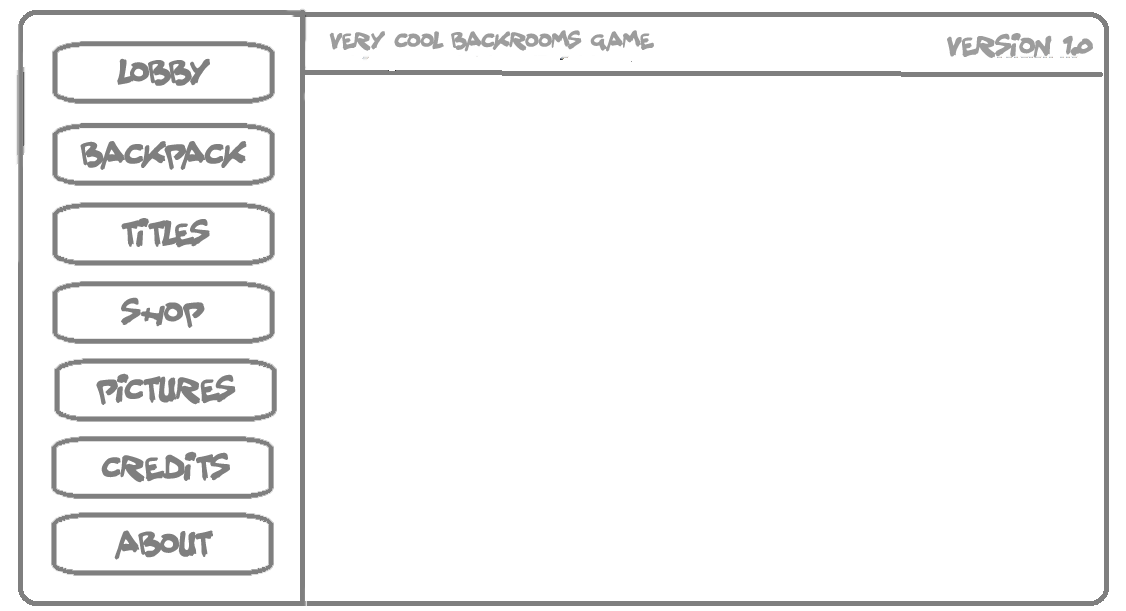
<style>
.page{position:relative;width:1126px;height:611px;background:#ffffff}
.page>*{position:absolute;margin:0}
.t1{font:20.7px "SplatterKings";color:#9d9d9d}
.t2{font:24.7px "SplatterKings";color:#9d9d9d}
.t3{font:30px "SplatterKings";color:#7f7f7f}
</style>
<div class="page">
<p class="t1" style="left:329px;top:30px;width:325px;height:22px">very cool backrooms game</p>
<p class="t2" style="left:947px;top:33px;width:146px;height:25px">Version 1.0</p>
<p class="t3" style="left:117px;top:58px;width:93px;height:28px">Lobby</p>
<p class="t3" style="left:80px;top:141px;width:167px;height:29px">Backpack</p>
<p class="t3" style="left:121px;top:218px;width:89px;height:30px">titles</p>
<p class="t3" style="left:121px;top:297px;width:84px;height:31px">shop</p>
<p class="t3" style="left:96px;top:373px;width:140px;height:32px">pictures</p>
<p class="t3" style="left:101px;top:451px;width:129px;height:32px">credits</p>
<p class="t3" style="left:114px;top:530px;width:99px;height:30px">about</p>
</div>
